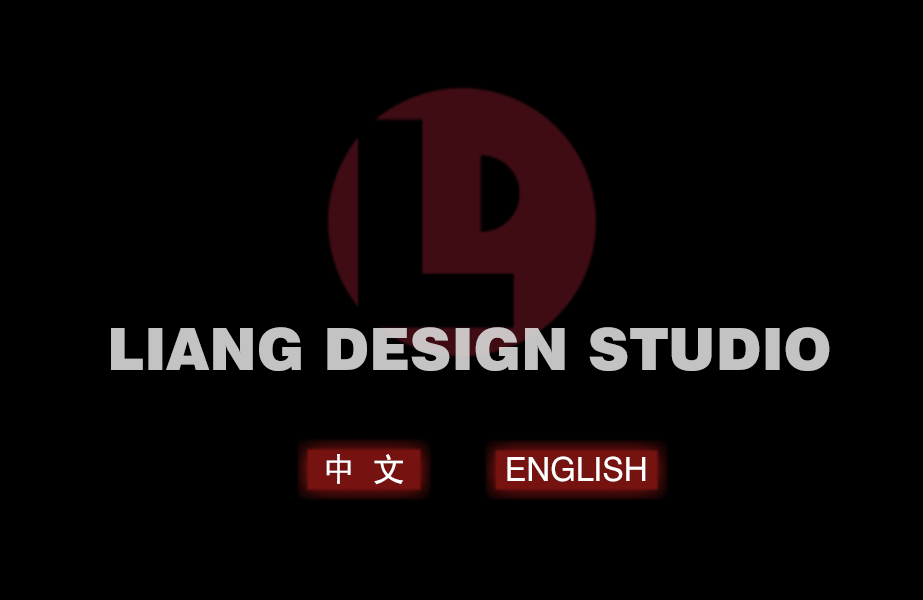
<style>
.page{position:relative;width:923px;height:600px;background:#000000}
.page>*{position:absolute;margin:0}
.t1{font:58.3px "Swiss721BT-Black";color:#c3c3c3}
.t2{font:33.3px "SimHei";color:#fffefe}
.t3{font:33.3px "Swiss721BT-Roman";color:#fffefe}
</style>
<div class="page">
<p class="t1" style="left:111px;top:327px;width:719px;height:44px">LIANG DESIGN STUDIO</p>
<p class="t2" style="left:326px;top:454px;width:78px;height:31px">中 文</p>
<p class="t3" style="left:507px;top:456px;width:139px;height:26px">ENGLISH</p>
</div>
